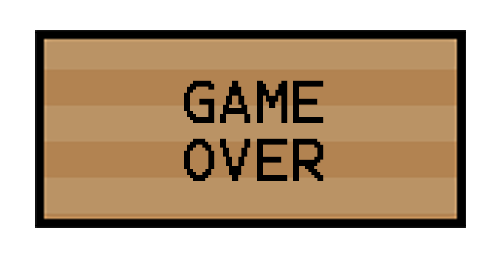
<style>
.page{position:relative;width:500px;height:258px;background:#ffffff}
.page>*{position:absolute;margin:0}
.t1{font:48.4px "Terminal";color:#000000}
</style>
<div class="page">
<p class="t1" style="left:184px;top:80px;width:140px;height:101px;text-align:center">GAME<br>OVER</p>
</div>
